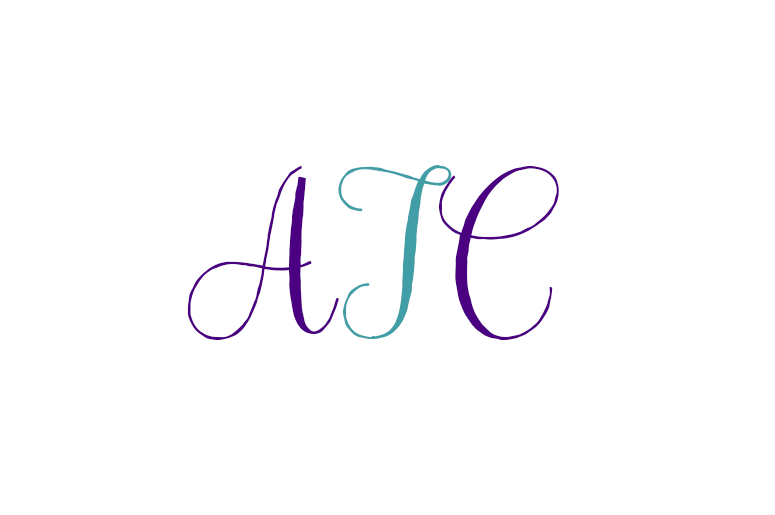
<style>
.page{position:relative;width:775px;height:515px;background:#ffffff}
.page>*{position:absolute;margin:0}
.t1{font:200px "Balqis";letter-spacing:0.05em;color:#4b0082}
.t2{font:200px "Balqis";letter-spacing:0.05em;color:#429ea6}
</style>
<div class="page">
<p class="t1" style="left:187px;top:165px;width:372px;height:175px">A<span class="t2">J</span>C</p>
</div>
